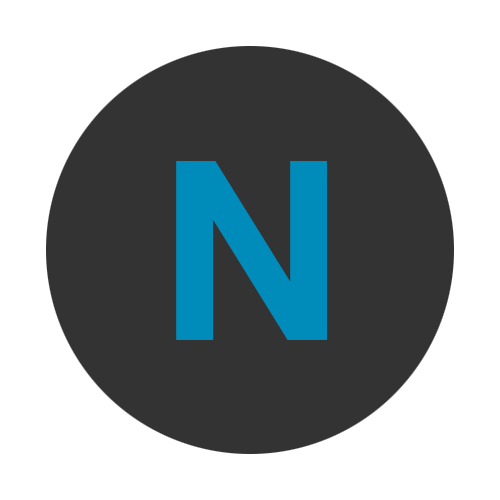
<style>
.page{position:relative;width:500px;height:500px;background:#ffffff}
.page>*{position:absolute;margin:0}
.t1{font:250px "HelveticaNeue-Bold";color:#008cba}
</style>
<div class="page">
<p class="t1" style="left:176px;top:161px;width:151px;height:179px">N</p>
</div>
